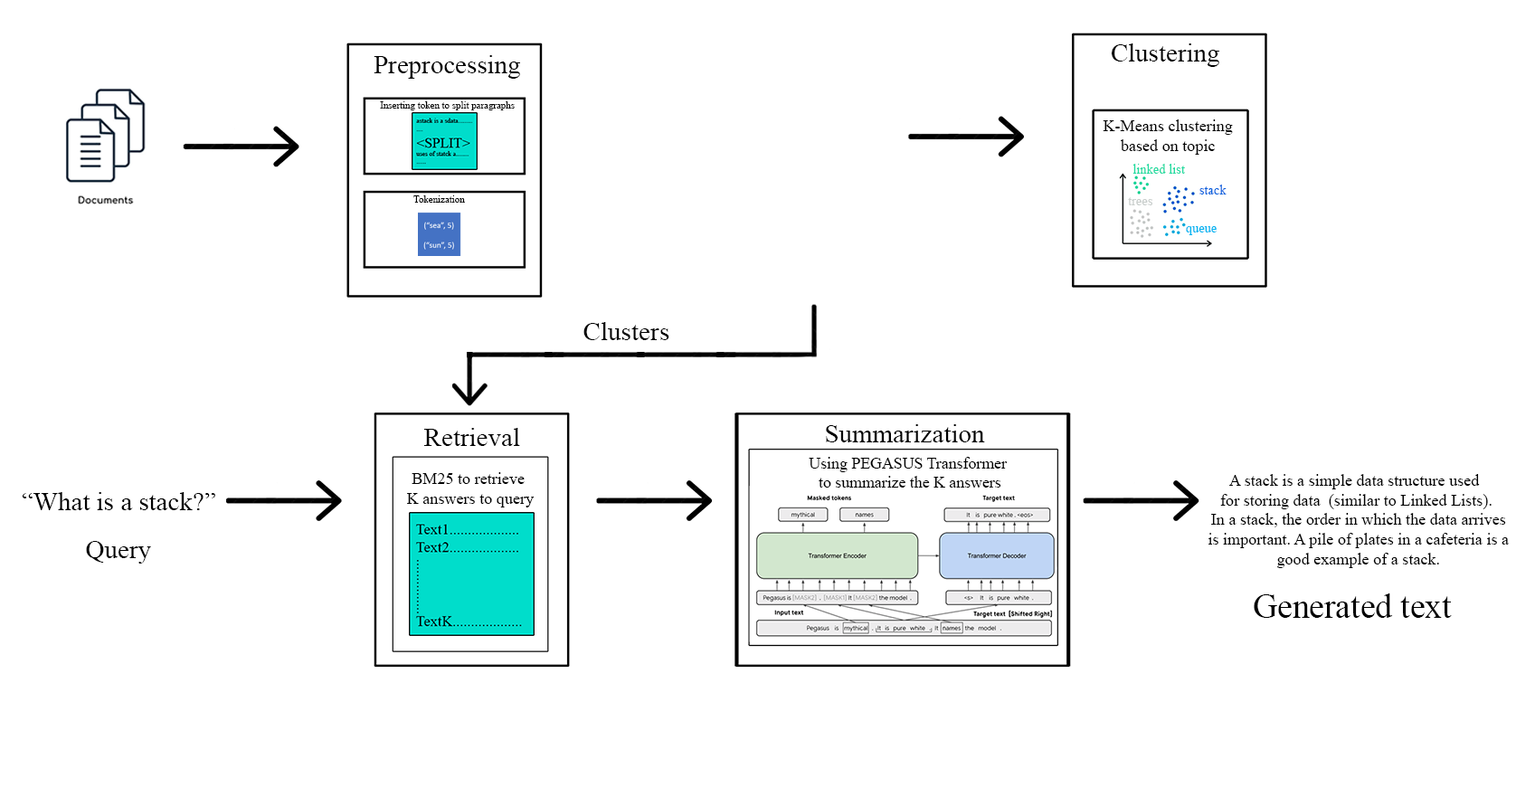
<style>
.page{position:relative;width:1516px;height:787px;background:#ffffff}
.page>*{position:absolute;margin:0}
.t1{font:26.2px "TimesNewRomanPSMT";color:#000000}
.t2{font:9.8px "TimesNewRomanPSMT";color:#000000}
.t3{font:16.4px "TimesNewRomanPSMT";color:#000000}
.t4{font:13.1px "TimesNewRomanPSMT";color:#22dba1}
.t5{font:13.1px "TimesNewRomanPSMT";color:#0563de}
.t6{font:13.1px "TimesNewRomanPSMT";color:#c9cecc}
.t7{font:13.1px "TimesNewRomanPSMT";color:#01b5f1}
.t8{font:26.4px "TimesNewRomanPSMT";color:#000000}
.t9{font:16.1px "TimesNewRomanPSMT";color:#000000}
.t10{font:33.9px "TimesNewRomanPSMT";color:#000000}
</style>
<div class="page">
<p class="t1" style="left:1111px;top:43px;width:108px;height:24px">Clustering</p>
<p class="t1" style="left:373px;top:55px;width:147px;height:24px">Preprocessing</p>
<p class="t2" style="left:380px;top:101px;width:135px;height:9px">Inserting token to split paragraphs</p>
<p class="t3" style="left:1102px;top:119px;width:131px;height:36px;text-align:center">K-Means clustering<br>based on topic</p>
<p class="t4" style="left:1132px;top:164px;width:53px;height:10px">linked list</p>
<p class="t5" style="left:1199px;top:184px;width:27px;height:10px">stack</p>
<p class="t2" style="left:413px;top:195px;width:52px;height:8px">Tokenization</p>
<p class="t6" style="left:1128px;top:197px;width:24px;height:8px">trees</p>
<p class="t7" style="left:1186px;top:226px;width:30px;height:9px">queue</p>
<p class="t8" style="left:583px;top:322px;width:86px;height:18px">Clusters</p>
<p class="t1" style="left:826px;top:424px;width:159px;height:18px">Summarization</p>
<p class="t1" style="left:424px;top:428px;width:96px;height:18px">Retrieval</p>
<p class="t9" style="left:808px;top:457px;width:199px;height:30px;text-align:center">Using PEGASUS Transformer <br>to summarize the K answers</p>
<p class="t3" style="left:407px;top:472px;width:127px;height:35px;text-align:center">BM25 to retrieve <br>K answers to query</p>
<p class="t3" style="left:1208px;top:474px;width:300px;height:94px;text-align:center">A stack is a simple data structure used <br>for storing data  (similar to Linked Lists).<br> In a stack, the order in which the data arrives<br> is important. A pile of plates in a cafeteria is a<br> good example of a stack.</p>
<p class="t1" style="left:22px;top:492px;width:193px;height:18px">“What is a stack?”</p>
<p class="t1" style="left:86px;top:541px;width:65px;height:22px">Query</p>
<p class="t10" style="left:1253px;top:593px;width:198px;height:25px">Generated text</p>
</div>
